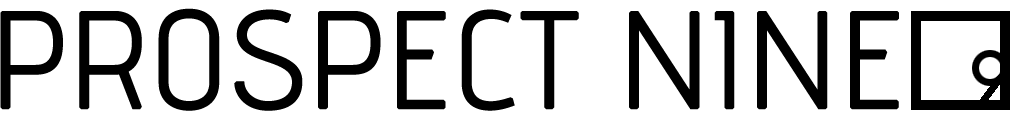
<style>
.page{position:relative;width:1024px;height:128px;background:#ffffff}
.page>*{position:absolute;margin:0}
.t1{font:135px "advent-Lt1";color:#000000;font-weight:bold}
</style>
<div class="page">
<p class="t1" style="left:0px;top:8px;width:899px;height:103px">PROSPECT NINE</p>
</div>
